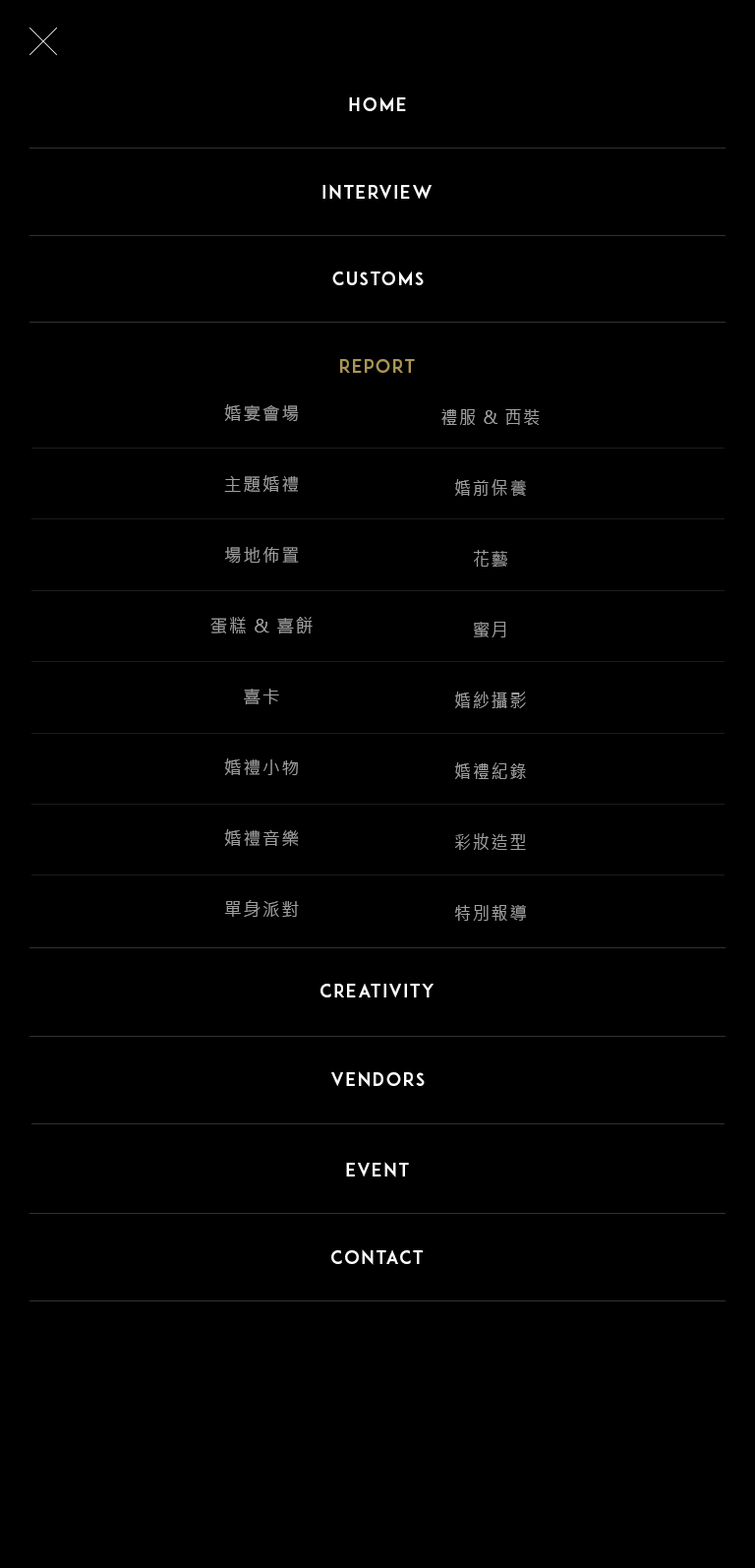
<style>
.page{position:relative;width:755px;height:1568px;background:#000000}
.page>*{position:absolute;margin:0}
.t1{font:17.7px "ADAM.CGPRO";letter-spacing:0.1em;color:#ffffff}
.t2{font:17.7px "ADAM.CGPRO";letter-spacing:0.1em;color:#a99655}
.t3{font:17.7px/70.8px "MicrosoftJhengHeiRegular";letter-spacing:0.08em;color:#a0a0a0}
.t4{font:17.7px/70.8px "MicrosoftJhengHeiRegular";letter-spacing:0.08em;color:#a0a0a0;scale:0.97 1}
</style>
<div class="page">
<p class="t1" style="left:349px;top:97px;width:57px;height:14px">HOME</p>
<p class="t1" style="left:323px;top:184px;width:109px;height:16px">INTERVIEW</p>
<p class="t1" style="left:332px;top:271px;width:92px;height:14px">cUSTOMS</p>
<p class="t2" style="left:340px;top:359px;width:75px;height:14px">report</p>
<p class="t3" style="left:211px;top:404px;width:102px;height:513px;text-align:center">婚宴會場<br>主題婚禮<br>場地佈置<br>蛋糕 &amp; 喜餅<br>喜卡<br>婚禮小物<br>婚禮音樂<br>單身派對</p>
<p class="t4" style="left:442px;top:409px;width:98px;height:512px;text-align:center">禮服 &amp; 西裝<br>婚前保養<br>花藝<br>蜜月<br>婚紗攝影<br>婚禮紀錄<br>彩妝造型<br>特別報導</p>
<p class="t1" style="left:321px;top:984px;width:113px;height:13px">cREATIVITY</p>
<p class="t1" style="left:332px;top:1071px;width:93px;height:16px">vendors</p>
<p class="t1" style="left:346px;top:1162px;width:63px;height:15px">EVENT</p>
<p class="t1" style="left:332px;top:1249px;width:91px;height:16px">CONTACT</p>
</div>
